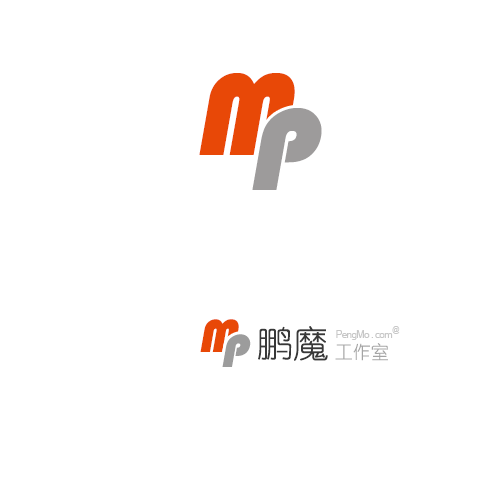
<style>
.page{position:relative;width:500px;height:500px;background:#ffffff}
.page>*{position:absolute;margin:0}
.t1{font:120px "Bauhaus93";color:#e84807;font-style:italic}
.t2{font:120px "Bauhaus93";color:#9d9b9b;font-style:italic}
.t3{font:48px "Bauhaus93";color:#e84807;font-style:italic}
.t4{font:36px "YouYuan";color:#383838}
.t5{font:48px "Bauhaus93";color:#9d9b9b;font-style:italic}
.t6{font:18px "YouYuan";color:#a4a4a4}
</style>
<div class="page">
<p class="t1" style="left:199px;top:73px;width:96px;height:82px">M</p>
<p class="t2" style="left:252px;top:108px;width:70px;height:82px">P</p>
<p class="t3" style="left:200px;top:319px;width:39px;height:33px">M</p>
<p class="t4" style="left:258px;top:326px;width:70px;height:35px">鹏魔</p>
<p class="t5" style="left:222px;top:334px;width:29px;height:33px">P</p>
<p class="t6" style="left:335px;top:343px;width:53px;height:18px">工作室</p>
</div>
